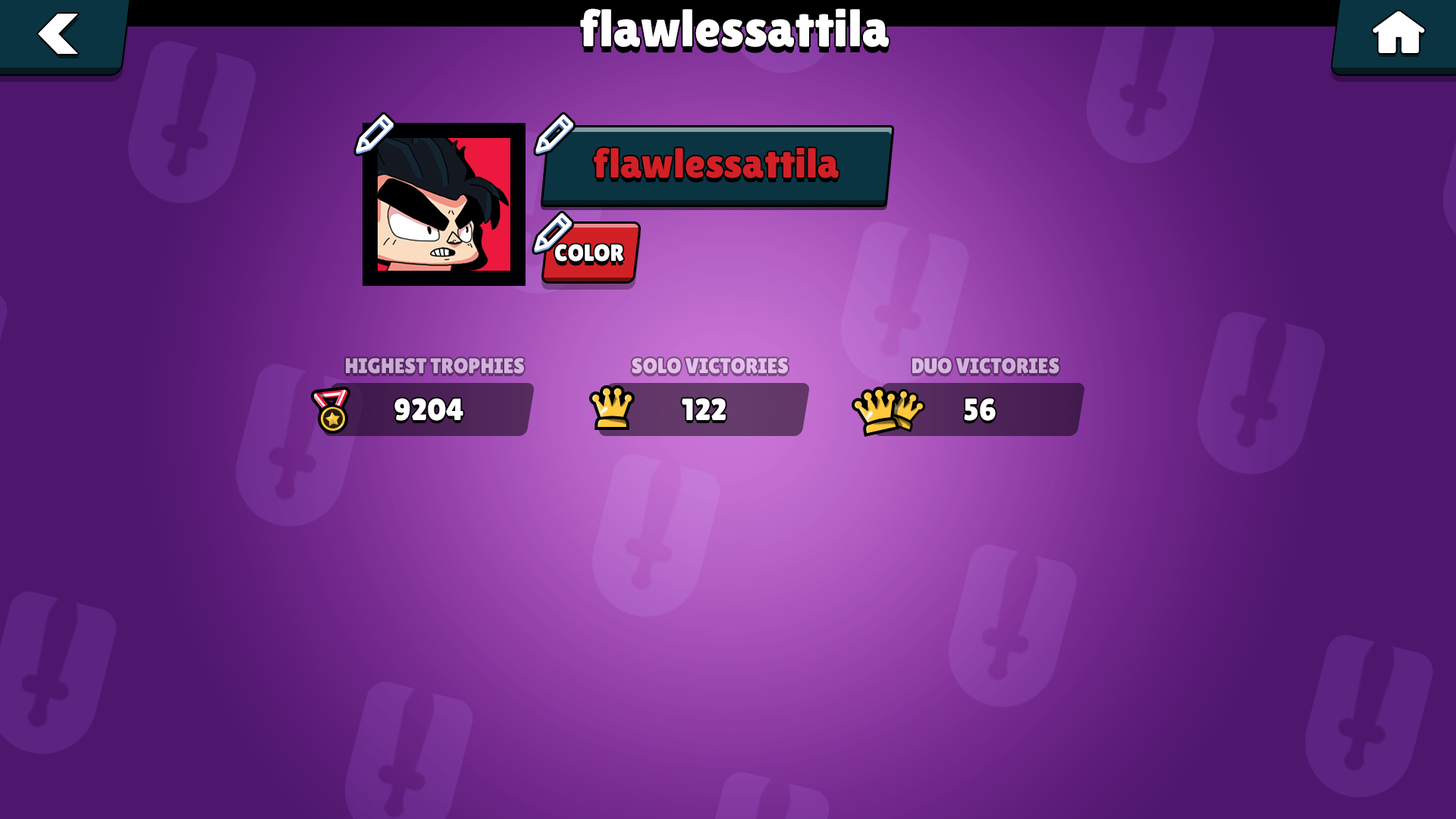
<style>
.page{position:relative;width:1456px;height:819px}
.page>*{position:absolute;margin:0}
.t1{font:52.7px "LilitaOne";color:#ffffff}
.t2{font:41.8px "LilitaOne";color:#d12127}
.t3{font:23.2px "LilitaOne";color:#ffffff}
.t4{font:21.1px "LilitaOne";color:#ceafd7}
.t5{font:21.1px "LilitaOne";color:#e3c0ea}
.t6{font:21.1px "LilitaOne";color:#d1b2da}
.t7{font:30.5px "LilitaOne";color:#ffffff}
</style>
<div class="page">
<p class="t1" style="left:580px;top:8px;width:309px;height:39px">flawlessattila</p>
<p class="t2" style="left:594px;top:148px;width:245px;height:30px">flawlessattila</p>
<p class="t3" style="left:555px;top:244px;width:69px;height:18px">COLOR</p>
<p class="t4" style="left:346px;top:358px;width:178px;height:16px">HIGHEST TROPHIES</p>
<p class="t5" style="left:632px;top:358px;width:156px;height:16px">SOLO VICTORIES</p>
<p class="t6" style="left:912px;top:358px;width:147px;height:16px">DUO VICTORIES</p>
<p class="t7" style="left:394px;top:398px;width:69px;height:23px">9204</p>
<p class="t7" style="left:682px;top:398px;width:44px;height:22px">122</p>
<p class="t7" style="left:964px;top:398px;width:32px;height:23px">56</p>
</div>
